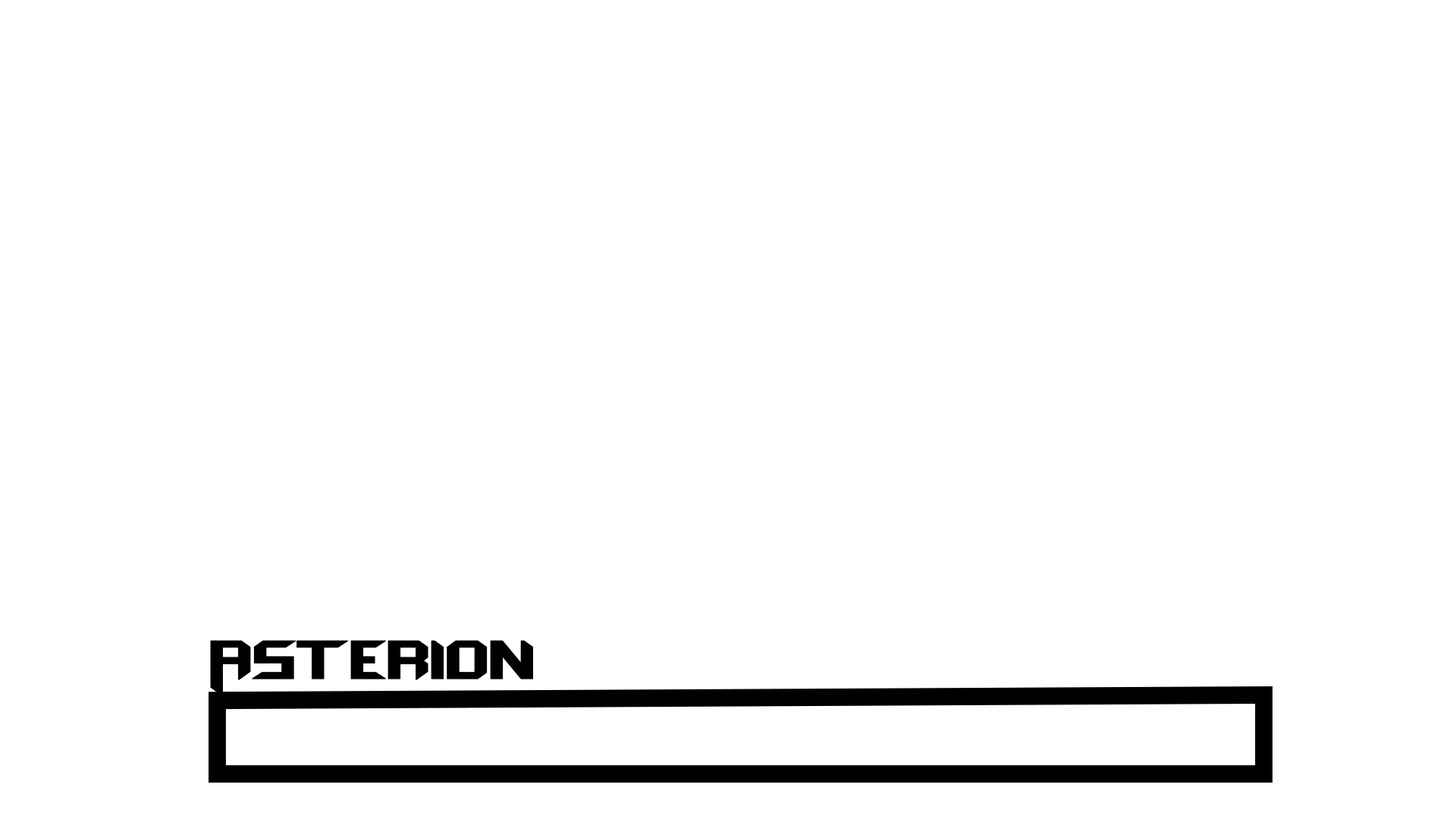
<style>
.page{position:relative;width:1456px;height:819px;background:#ffffff}
.page>*{position:absolute;margin:0}
.t1{font:54.9px "TheBeastRegular";color:#000000;scale:1.74 1}
</style>
<div class="page">
<p class="t1" style="left:210px;top:640px;width:323px;height:56px">Asterion</p>
</div>
